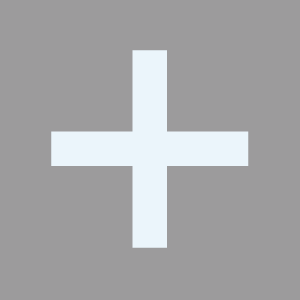
<style>
.page{position:relative;width:300px;height:300px;background:#9c9b9c}
.page>*{position:absolute;margin:0}
.t1{font:416.7px "ArialMT";color:#ebf5fb}
</style>
<div class="page">
<p class="t1" style="left:51px;top:50px;width:198px;height:198px">+</p>
</div>
